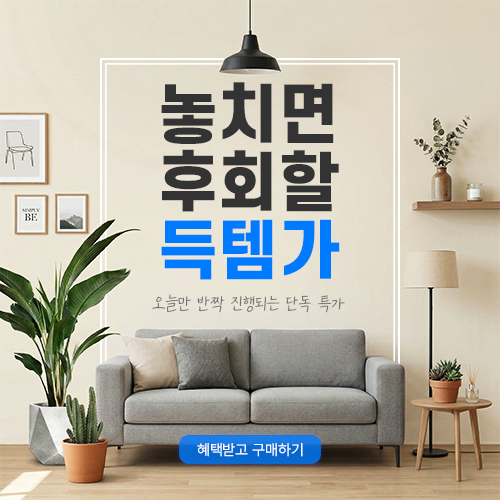
<style>
.page{position:relative;width:500px;height:500px}
.page>*{position:absolute;margin:0}
.t1{font:62.8px/68px "S-CoreDream-8Heavy";color:#333333}
.t2{font:62.8px/68px "S-CoreDream-8Heavy";color:#007bff}
.t3{font:20px "NanumGaRamYeonGgoc";color:#666666}
.t4{font:15px "Pretendard-Light";color:#ffffff}
</style>
<div class="page">
<p class="t1" style="left:161px;top:82px;width:179px;height:198px;text-align:center">놓치면<br>후회할<br><span class="t2">득템가</span></p>
<p class="t3" style="left:152px;top:294px;width:193px;height:19px">오늘만 반짝 진행되는 단독 특가</p>
<p class="t4" style="left:197px;top:443px;width:106px;height:14px">혜택받고 구매하기</p>
</div>
